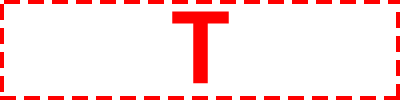
<style>
.page{position:relative;width:400px;height:100px;background:#ffffff}
.page>*{position:absolute;margin:0}
.t1{font:100px "Arial-BoldMT";color:#ff0000}
</style>
<div class="page">
<p class="t1" style="left:172px;top:11px;width:57px;height:73px">T</p>
</div>
